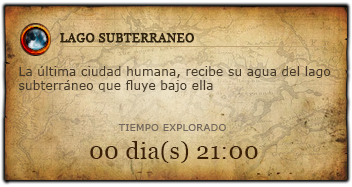
<style>
.page{position:relative;width:352px;height:187px}
.page>*{position:absolute;margin:0}
.t1{font:12px "Georgia";letter-spacing:0.02em;color:#2f220e;font-weight:bold}
.t2{font:12px "Verdana";letter-spacing:0.02em;color:#463b2b}
.t3{font:10px "Verdana";letter-spacing:0.02em;color:#73685e}
.t4{font:24px "Georgia";letter-spacing:0.02em;color:#3b1e06}
</style>
<div class="page">
<p class="t1" style="left:60px;top:33px;width:134px;height:10px">LAGO SUBTERRANEO</p>
<p class="t2" style="left:19px;top:66px;width:312px;height:26px;text-align:right">La última ciudad humana, recibe su agua del lago subterráneo que fluye bajo ella</p>
<p class="t3" style="left:118px;top:124px;width:108px;height:7px">TIEMPO EXPLORADO</p>
<p class="t4" style="left:90px;top:141px;width:168px;height:22px">00 dia(s) 21:00</p>
</div>
